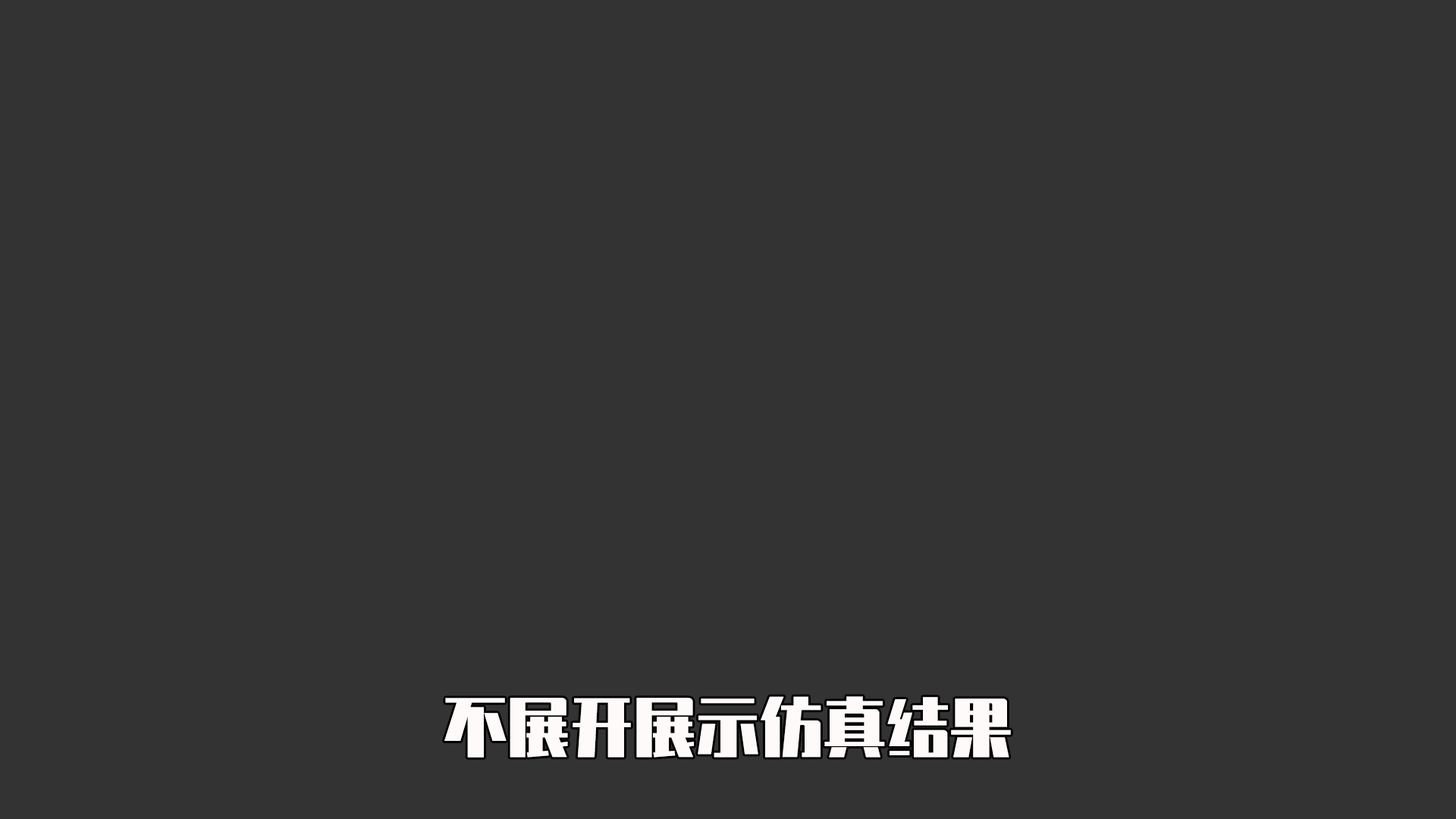
<style>
.page{position:relative;width:1456px;height:819px;background:#333333}
.page>*{position:absolute;margin:0}
.t1{font:63.2px "ZhenyanGB-Regular";color:#fefafa}
</style>
<div class="page">
<p class="t1" style="left:444px;top:696px;width:567px;height:62px">不展开展示仿真结果</p>
</div>
